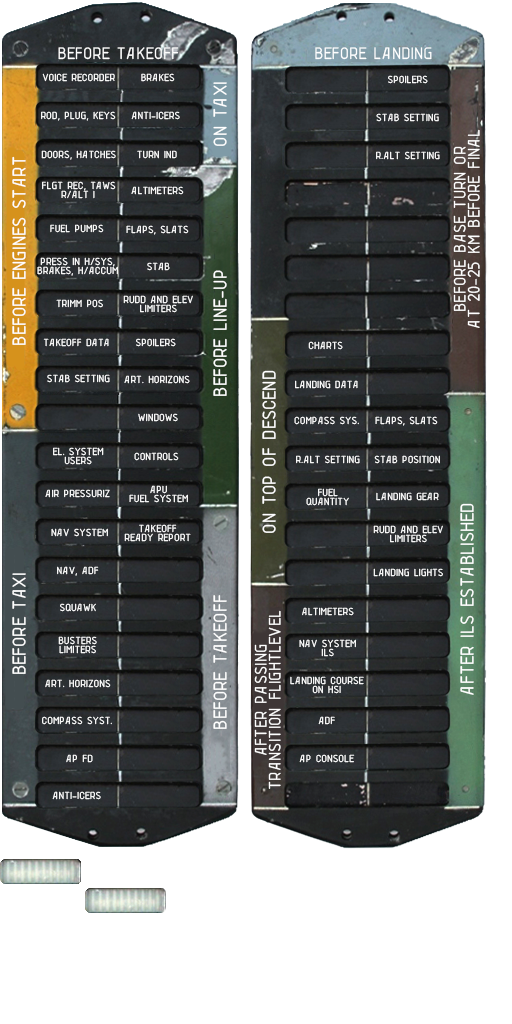
<style>
.page{position:relative;width:512px;height:1024px;background:#ffffff}
.page>*{position:absolute;margin:0}
.t1{font:18px "LENYA69";color:#ffffff}
.t2{font:11px "LENYA69";color:#ffffff}
.t3{font:20px "LENYA69";color:#ffffff}
.t4{font:18px/14px "LENYA69";color:#ffffff}
.t5{font:11px/9px "LENYA69";color:#ffffff}
</style>
<div class="page">
<p class="t1" style="left:58px;top:47px;width:121px;height:13px">BEFORE TAKEOFF</p>
<p class="t1" style="left:315px;top:47px;width:117px;height:13px">BEFORE LANDING</p>
<p class="t2" style="left:42px;top:73px;width:73px;height:9px">VOICE RECORDER</p>
<p class="t2" style="left:141px;top:73px;width:34px;height:9px">BRAKES</p>
<p class="t2" style="left:388px;top:75px;width:40px;height:9px">SPOILERS</p>
<p class="t3" style="left:213px;top:82px;width:14px;height:64px;rotate:-90deg">ON TAXI</p>
<p class="t2" style="left:41px;top:111px;width:75px;height:10px">ROD, PLUG, KEYS</p>
<p class="t2" style="left:131px;top:111px;width:49px;height:9px">ANTI-ICERS</p>
<p class="t2" style="left:376px;top:113px;width:63px;height:9px">STAB SETTING</p>
<p class="t4" style="left:453px;top:129px;width:27px;height:199px;text-align:center;rotate:-90deg">BEFORE BASE TURN OR<br>AT 20-25 KM BEFORE FINAL</p>
<p class="t2" style="left:41px;top:150px;width:75px;height:10px">DOORS, HATCHES</p>
<p class="t2" style="left:137px;top:150px;width:40px;height:9px">TURN IND</p>
<p class="t3" style="left:12px;top:156px;width:14px;height:189px;rotate:-90deg">BEFORE ENGINES START</p>
<p class="t2" style="left:376px;top:151px;width:64px;height:9px">R.ALT SETTING</p>
<p class="t5" style="left:42px;top:181px;width:74px;height:18px;text-align:center">FLGT REC, TAWS<br>R/ALT 1</p>
<p class="t2" style="left:131px;top:186px;width:53px;height:9px">ALTIMETERS</p>
<p class="t2" style="left:50px;top:224px;width:54px;height:9px">FUEL PUMPS</p>
<p class="t2" style="left:126px;top:225px;width:63px;height:10px">FLAPS, SLATS</p>
<p class="t5" style="left:37px;top:257px;width:81px;height:19px;text-align:center">PRESS IN H/SYS,<br>BRAKES, H/ACCUM</p>
<p class="t2" style="left:147px;top:262px;width:23px;height:9px">STAB</p>
<p class="t3" style="left:213px;top:270px;width:14px;height:126px;rotate:-90deg">BEFORE LINE-UP</p>
<p class="t2" style="left:56px;top:299px;width:47px;height:9px">TRIMM POS</p>
<p class="t5" style="left:123px;top:295px;width:70px;height:18px;text-align:center">RUDD AND ELEV<br>LIMITERS</p>
<p class="t2" style="left:43px;top:338px;width:66px;height:9px">TAKEOFF DATA</p>
<p class="t2" style="left:136px;top:338px;width:40px;height:9px">SPOILERS</p>
<p class="t2" style="left:308px;top:341px;width:35px;height:9px">CHARTS</p>
<p class="t2" style="left:47px;top:374px;width:63px;height:9px">STAB SETTING</p>
<p class="t2" style="left:124px;top:375px;width:66px;height:9px">ART. HORIZONS</p>
<p class="t3" style="left:262px;top:370px;width:14px;height:163px;rotate:-90deg">ON TOP OF DESCEND</p>
<p class="t2" style="left:295px;top:380px;width:63px;height:9px">LANDING DATA</p>
<p class="t2" style="left:138px;top:413px;width:40px;height:9px">WINDOWS</p>
<p class="t2" style="left:294px;top:416px;width:65px;height:9px">COMPASS SYS.</p>
<p class="t2" style="left:375px;top:416px;width:63px;height:10px">FLAPS, SLATS</p>
<p class="t5" style="left:53px;top:447px;width:51px;height:18px;text-align:center">EL. SYSTEM<br>USERS</p>
<p class="t2" style="left:134px;top:452px;width:45px;height:9px">CONTROLS</p>
<p class="t2" style="left:296px;top:455px;width:64px;height:9px">R.ALT SETTING</p>
<p class="t2" style="left:374px;top:455px;width:66px;height:9px">STAB POSITION</p>
<p class="t5" style="left:129px;top:485px;width:59px;height:18px;text-align:center">APU<br>FUEL SYSTEM</p>
<p class="t2" style="left:45px;top:489px;width:65px;height:9px">AIR PRESSURIZ</p>
<p class="t5" style="left:306px;top:488px;width:43px;height:18px;text-align:center">FUEL<br>QUANTITY</p>
<p class="t2" style="left:376px;top:492px;width:63px;height:9px">LANDING GEAR</p>
<p class="t3" style="left:460px;top:503px;width:14px;height:192px;rotate:-90deg">AFTER ILS ESTABLISHED</p>
<p class="t2" style="left:51px;top:528px;width:57px;height:9px">NAV SYSTEM</p>
<p class="t5" style="left:124px;top:524px;width:67px;height:18px;text-align:center">TAKEOFF<br>READY REPORT</p>
<p class="t5" style="left:373px;top:525px;width:70px;height:18px;text-align:center">RUDD AND ELEV<br>LIMITERS</p>
<p class="t2" style="left:57px;top:566px;width:42px;height:10px">NAV, ADF</p>
<p class="t2" style="left:373px;top:568px;width:70px;height:9px">LANDING LIGHTS</p>
<p class="t3" style="left:12px;top:573px;width:14px;height:101px;rotate:-90deg">BEFORE TAXI</p>
<p class="t2" style="left:60px;top:603px;width:36px;height:9px">SQUAWK</p>
<p class="t3" style="left:213px;top:595px;width:14px;height:134px;rotate:-90deg">BEFORE TAKEOFF</p>
<p class="t4" style="left:254px;top:610px;width:27px;height:179px;text-align:center;rotate:-90deg">AFTER PASSING<br>TRANSITION FLIGHTLEVEL</p>
<p class="t2" style="left:302px;top:607px;width:52px;height:9px">ALTIMETERS</p>
<p class="t5" style="left:58px;top:636px;width:39px;height:18px;text-align:center">BUSTERS<br>LIMITERS</p>
<p class="t5" style="left:299px;top:639px;width:57px;height:18px;text-align:center">NAV SYSTEM<br>ILS</p>
<p class="t5" style="left:290px;top:676px;width:74px;height:18px;text-align:center">LANDING COURSE<br>ON HSI</p>
<p class="t2" style="left:45px;top:679px;width:66px;height:9px">ART. HORIZONS</p>
<p class="t2" style="left:42px;top:716px;width:70px;height:9px">COMPASS SYST.</p>
<p class="t2" style="left:318px;top:716px;width:17px;height:9px">ADF</p>
<p class="t2" style="left:66px;top:754px;width:27px;height:9px">AP FD</p>
<p class="t2" style="left:299px;top:754px;width:56px;height:9px">AP CONSOLE</p>
<p class="t2" style="left:52px;top:791px;width:49px;height:9px">ANTI-ICERS</p>
</div>
